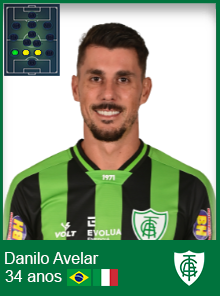
<style>
.page{position:relative;width:220px;height:296px;background:#ffffff}
.page>*{position:absolute;margin:0}
.t1{font:16px "ArialMT";color:#ffffff}
</style>
<div class="page">
<p class="t1" style="left:5px;top:252px;width:94px;height:12px">Danilo Avelar</p>
<p class="t1" style="left:5px;top:270px;width:57px;height:12px">34 anos</p>
</div>
